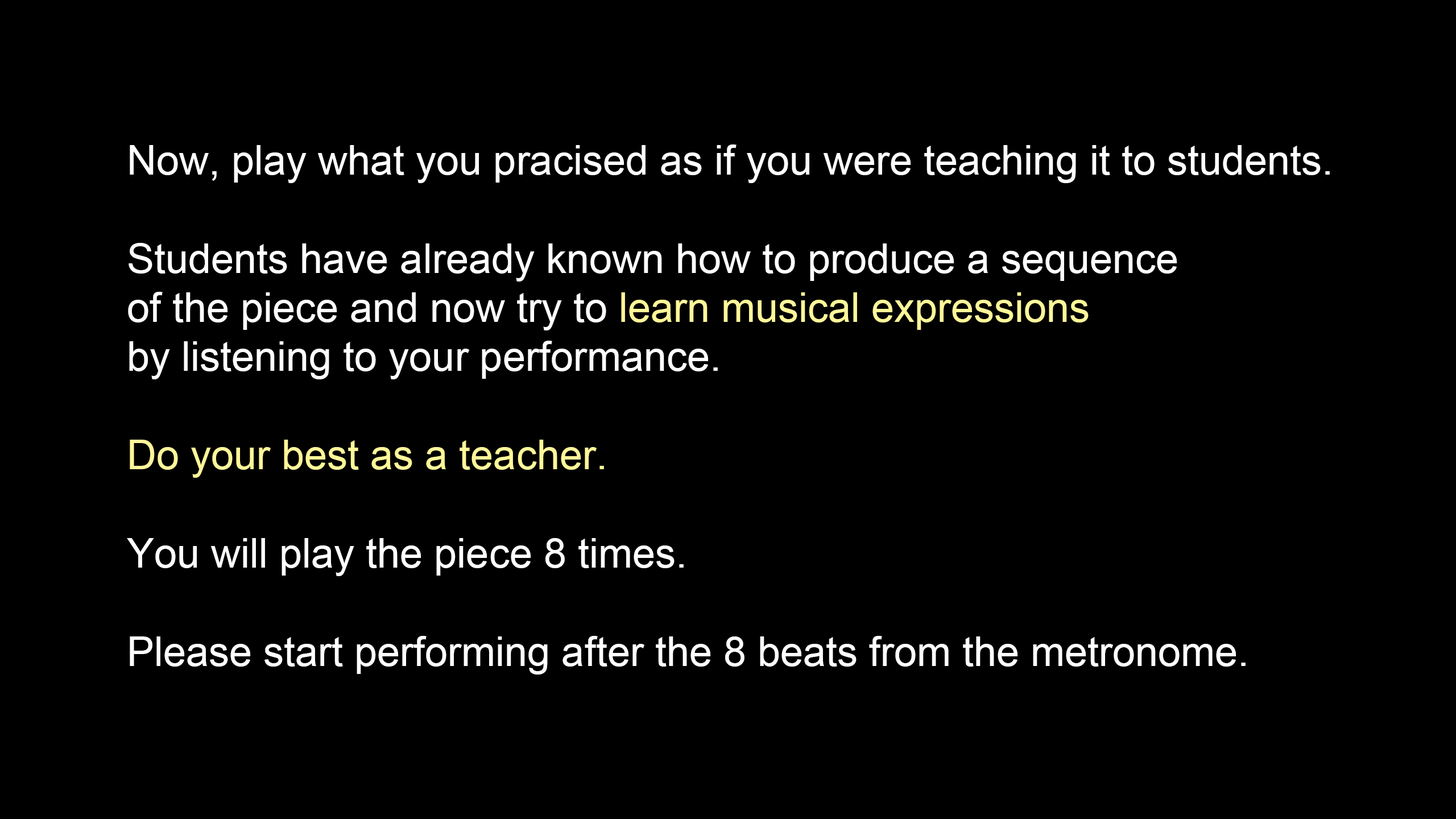
<style>
.page{position:relative;width:1456px;height:819px;background:#000000}
.page>*{position:absolute;margin:0}
.t1{font:40.9px "ArialMT";color:#ffffff}
.t2{font:40.9px "ArialMT";color:#fff799}
</style>
<div class="page">
<p class="t1" style="left:127px;top:144px;width:1203px;height:531px">Now, play what you pracised as if you were teaching it to students.<br><br>Students have already known how to produce a sequence<br>of the piece and now try to <span class="t2">learn musical expressions<br></span>by listening to your performance.<br><br><span class="t2">Do your best as a teacher.<br></span><br>You will play the piece 8 times.<br><br>Please start performing after the 8 beats from the metronome.</p>
</div>
